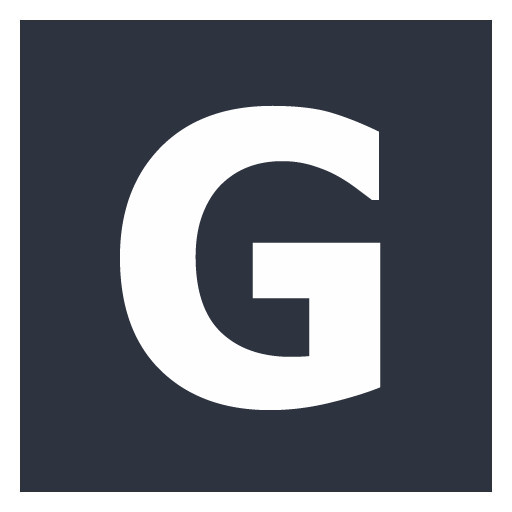
<style>
.page{position:relative;width:512px;height:512px;background:#2d333f}
.page>*{position:absolute;margin:0}
.t1{font:400px "Tahoma-Bold";color:#fefefe}
</style>
<div class="page">
<p class="t1" style="left:120px;top:105px;width:261px;height:305px">G</p>
</div>
